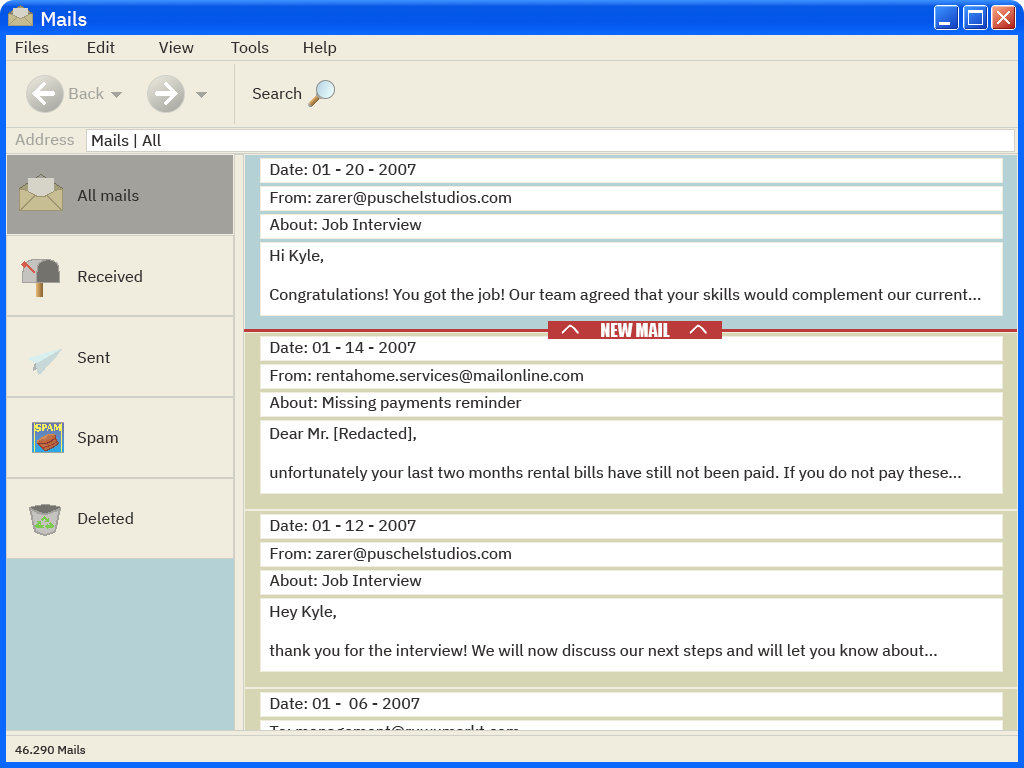
<style>
.page{position:relative;width:1024px;height:768px;background:#ffffff}
.page>*{position:absolute;margin:0}
.t1{font:19.7px "IBMPlexSans-Text";color:#ffffff}
.t2{font:16px "IBMPlexSans-Text";color:#302d2d}
.t3{font:16px "IBMPlexSans-Text";color:#a4a59f}
.t4{font:18px "Impact";color:#ffffff}
.t5{font:16px "IBMPlexSans-Text"}
.t6{font:12px "IBMPlexSans-Text";color:#332d2d}
</style>
<div class="page">
<p class="t1" style="left:41px;top:11px;width:46px;height:15px">Mails</p>
<p class="t2" style="left:16px;top:41px;width:321px;height:15px">Files  Edit  View  Tools Help</p>
<p class="t3" style="left:69px;top:87px;width:35px;height:12px">Back</p>
<p class="t2" style="left:252px;top:87px;width:50px;height:12px">Search</p>
<p class="t3" style="left:15px;top:133px;width:59px;height:12px">Address</p>
<p class="t2" style="left:92px;top:134px;width:69px;height:14px">Mails | All</p>
<p class="t2" style="left:270px;top:164px;width:146px;height:11px">Date: 01 - 20 - 2007</p>
<p class="t2" style="left:77px;top:189px;width:62px;height:12px">All mails</p>
<p class="t2" style="left:270px;top:191px;width:241px;height:15px">From: zarer@puschelstudios.com</p>
<p class="t2" style="left:269px;top:218px;width:153px;height:12px">About: Job Interview</p>
<p class="t2" style="left:270px;top:249px;width:711px;height:54px">Hi Kyle,<br><br>Congratulations! You got the job! Our team agreed that your skills would complement our current...</p>
<p class="t2" style="left:78px;top:270px;width:64px;height:12px">Received</p>
<p class="t4" style="left:601px;top:323px;width:69px;height:14px">NEW MAIL</p>
<p class="t2" style="left:270px;top:342px;width:146px;height:11px">Date: 01 - 14 - 2007</p>
<p class="t2" style="left:77px;top:352px;width:33px;height:11px">Sent</p>
<p class="t2" style="left:270px;top:369px;width:313px;height:14px">From: rentahome.services@mailonline.com</p>
<p class="t2" style="left:269px;top:396px;width:253px;height:15px">About: Missing payments reminder</p>
<p class="t2" style="left:77px;top:432px;width:41px;height:14px">Spam</p>
<p class="t2" style="left:270px;top:427px;width:691px;height:54px">Dear Mr. [Redacted],<br><br>unfortunately your last two months rental bills have still not been paid. If you do not pay these... debts...</p>
<p class="t2" style="left:78px;top:512px;width:55px;height:12px">Deleted</p>
<p class="t2" style="left:270px;top:520px;width:146px;height:11px">Date: 01 - 12 - 2007</p>
<p class="t2" style="left:270px;top:547px;width:241px;height:15px">From: zarer@puschelstudios.com</p>
<p class="t2" style="left:269px;top:574px;width:153px;height:12px">About: Job Interview</p>
<p class="t2" style="left:269px;top:605px;width:668px;height:54px">Hey Kyle,<br><br>thank you for the interview! We will now discuss our next steps and will let you know about...</p>
<p class="t2" style="left:270px;top:698px;width:150px;height:11px">Date: 01 -  06 - 2007</p>
<p class="t5" style="left:269px;top:725px;width:250px;height:15px">To: management@ruwumarkt.com</p>
<p class="t6" style="left:15px;top:745px;width:71px;height:9px">46.290 Mails</p>
</div>
